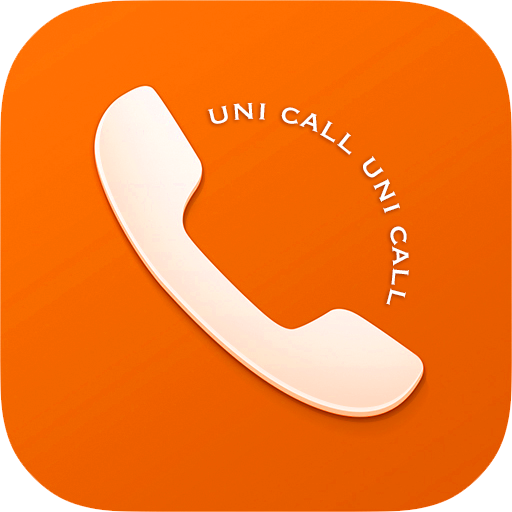
<style>
.page{position:relative;width:512px;height:512px}
.page>*{position:absolute;margin:0}
.t1{font:36px "Copperplate";color:#ffffff}
</style>
<div class="page">
<p class="t1" style="left:207px;top:102px;width:202px;height:203px;text-align:center">uni call uni call uni</p>
</div>
